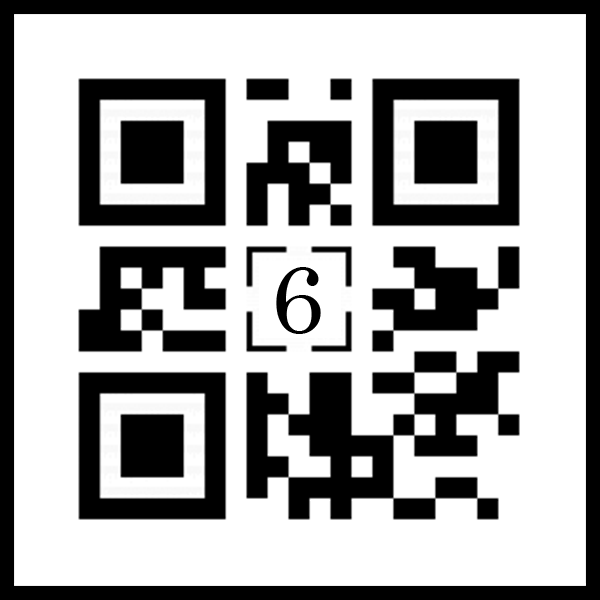
<style>
.page{position:relative;width:600px;height:600px;background:#ffffff}
.page>*{position:absolute;margin:0}
.t1{font:95.2px "Century";color:#000000}
</style>
<div class="page">
<p class="t1" style="left:276px;top:267px;width:45px;height:67px">6</p>
</div>
